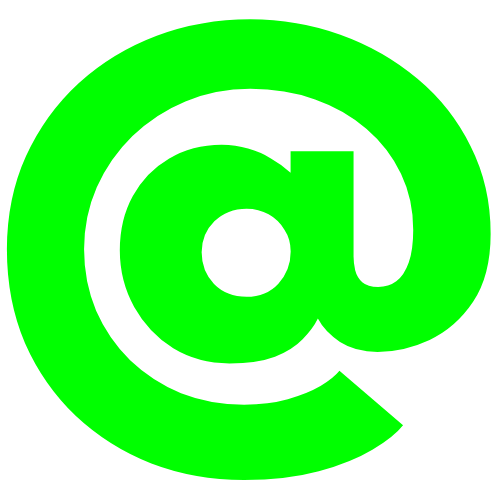
<style>
.page{position:relative;width:500px;height:500px;background:#00ff00}
.page>*{position:absolute;margin:0}
.t1{font:673.8px "LeagueSpartan-Bold";color:#00ff00}
</style>
<div class="page">
<p class="t1" style="left:6px;top:19px;width:485px;height:461px">@</p>
</div>
